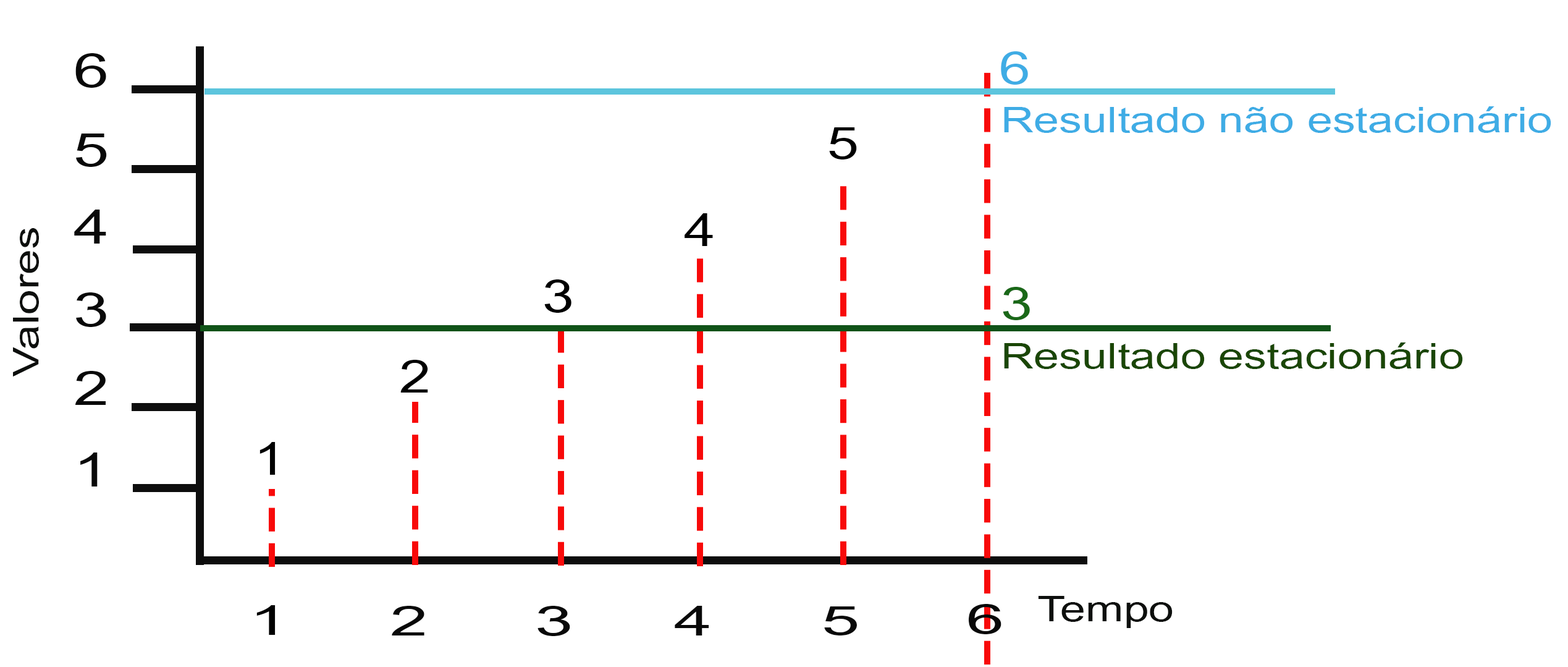
<style>
.page{position:relative;width:1568px;height:667px;background:#ffffff}
.page>*{position:absolute;margin:0}
.t1{font:79.8px "ArialNarrow";color:#090909;scale:1.67 1}
.t2{font:76px "ArialNarrow";color:#3face5;scale:1.56 1}
.t3{font:60.8px "ArialNarrow";color:#3face5;scale:1.56 1}
.t4{font:76px "ArialNarrow";color:#000000;scale:1.56 1}
.t5{font:60.8px "ArialNarrow";color:#0d0f0d;scale:1.56 1}
.t6{font:76px "ArialNarrow";color:#1a6818;scale:1.56 1}
.t7{font:60.8px "ArialNarrow";color:#1a4605;scale:1.56 1}
.t8{font:69.3px "ArialNarrow";color:#000000;scale:2.06 1}
.t9{font:69.3px "ArialNarrow";color:#090909;scale:2.06 1}
</style>
<div class="page">
<p class="t1" style="left:75px;top:53px;width:31px;height:35px">6</p>
<p class="t2" style="left:1001px;top:51px;width:27px;height:34px">6</p>
<p class="t3" style="left:1004px;top:106px;width:547px;height:27px">Resultado não estacionário</p>
<p class="t1" style="left:76px;top:133px;width:31px;height:34px">5</p>
<p class="t4" style="left:829px;top:127px;width:28px;height:32px">5</p>
<p class="t1" style="left:74px;top:209px;width:32px;height:34px">4</p>
<p class="t4" style="left:685px;top:213px;width:28px;height:33px">4</p>
<p class="t5" style="left:13px;top:228px;width:26px;height:149px;rotate:-90deg">Valores</p>
<p class="t4" style="left:544px;top:279px;width:27px;height:34px">3</p>
<p class="t1" style="left:76px;top:292px;width:30px;height:35px">3</p>
<p class="t6" style="left:1003px;top:287px;width:27px;height:33px">3</p>
<p class="t7" style="left:1004px;top:342px;width:459px;height:27px">Resultado estacionário</p>
<p class="t4" style="left:400px;top:360px;width:28px;height:32px">2</p>
<p class="t1" style="left:75px;top:371px;width:31px;height:34px">2</p>
<p class="t4" style="left:259px;top:442px;width:17px;height:32px">1</p>
<p class="t1" style="left:80px;top:452px;width:18px;height:34px">1</p>
<p class="t8" style="left:256px;top:605px;width:20px;height:29px">1</p>
<p class="t9" style="left:392px;top:605px;width:32px;height:30px">2</p>
<p class="t9" style="left:537px;top:605px;width:33px;height:31px">3</p>
<p class="t9" style="left:675px;top:605px;width:34px;height:30px">4</p>
<p class="t9" style="left:968px;top:604px;width:33px;height:30px">6</p>
<p class="t5" style="left:1038px;top:596px;width:135px;height:32px">Tempo</p>
<p class="t9" style="left:824px;top:606px;width:33px;height:29px">5</p>
</div>
